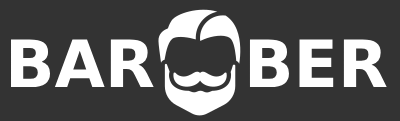
<style>
.page{position:relative;width:400px;height:121px;background:#333333}
.page>*{position:absolute;margin:0}
.t1{font:65px "SegoeUIThis-Bold";color:#ffffff}
</style>
<div class="page">
<p class="t1" style="left:11px;top:39px;width:143px;height:48px">BAR</p>
<p class="t1" style="left:249px;top:39px;width:138px;height:48px">BER</p>
</div>
